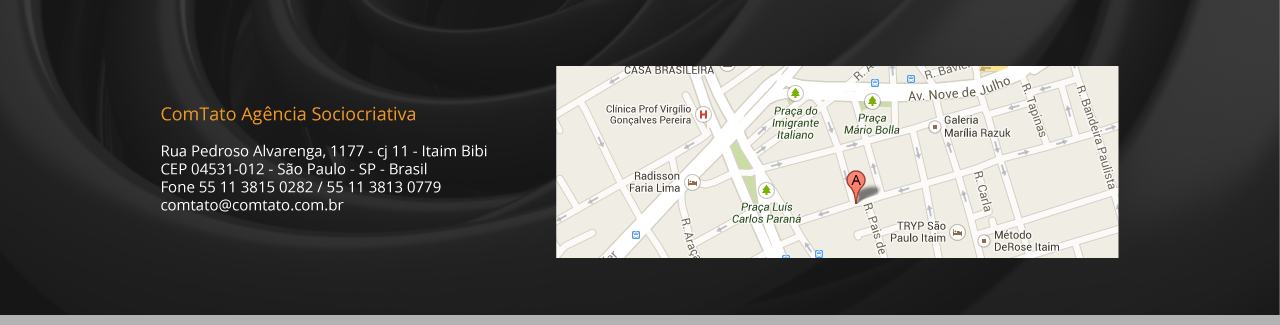
<style>
.page{position:relative;width:1280px;height:325px}
.page>*{position:absolute;margin:0}
.t1{font:15px "OpenSans";color:#ffffff}
.t2{font:18px "OpenSans";color:#f19822}
</style>
<div class="page">
<p class="t1" style="left:161px;top:106px;width:326px;height:106px"><span class="t2">ComTato Agência Sociocriativa<br></span><br>Rua Pedroso Alvarenga, 1177 - cj 11 - Itaim Bibi <br>CEP 04531-012 - São Paulo - SP - Brasil<br>Fone 55 11 3815 0282 / 55 11 3813 0779<br>comtato@comtato.com.br</p>
</div>
